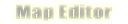
<style>
.page{position:relative;width:128px;height:24px;background:#ffffff}
.page>*{position:absolute;margin:0}
.t1{font:18px "Impact";color:#c4c3b7;scale:1.25 1}
</style>
<div class="page">
<p class="t1" style="left:16px;top:4px;width:96px;height:17px">Map Editor</p>
</div>
